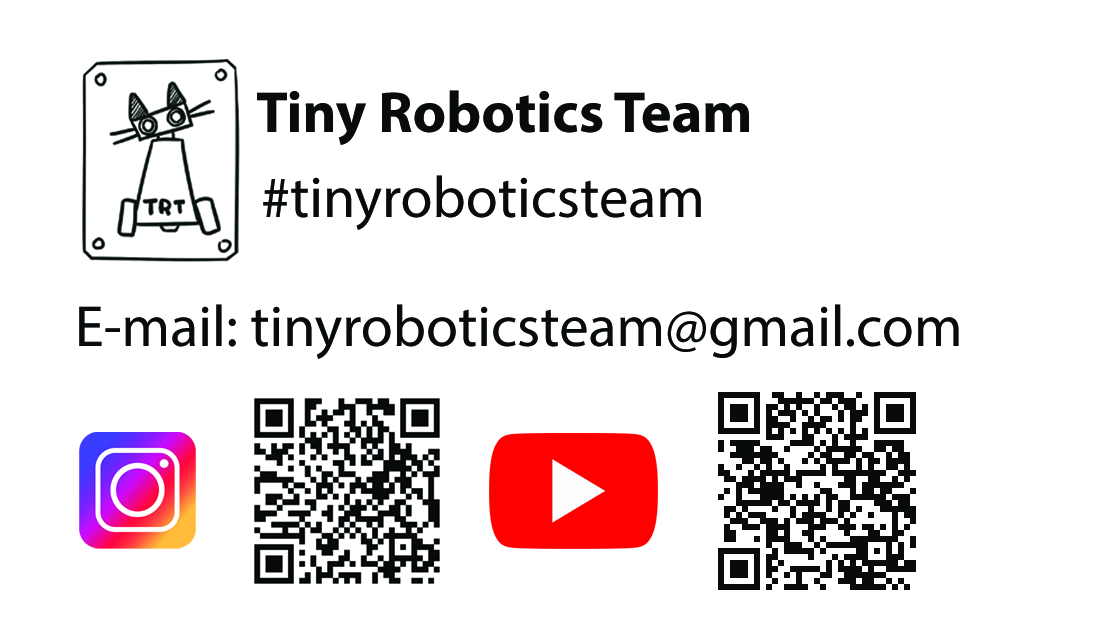
<style>
.page{position:relative;width:1110px;height:638px;background:#ffffff}
.page>*{position:absolute;margin:0}
.t1{font:58.3px "MyriadPro-Bold";color:#070a0a}
.t2{font:58.3px "MyriadPro-Regular";color:#070a0a}
</style>
<div class="page">
<p class="t1" style="left:257px;top:90px;width:492px;height:55px">Tiny Robotics Team</p>
<p class="t2" style="left:263px;top:175px;width:438px;height:55px">#tinyroboticsteam</p>
<p class="t2" style="left:79px;top:304px;width:880px;height:55px">E-mail: tinyroboticsteam@gmail.com</p>
</div>
